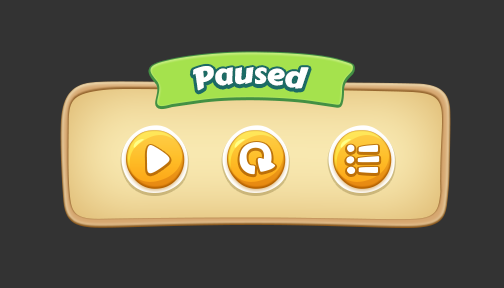
<style>
.page{position:relative;width:504px;height:288px;background:#333333}
.page>*{position:absolute;margin:0}
.t1{font:30px "CarterOne";letter-spacing:-0.02em;color:#ffffff}
</style>
<div class="page">
<p class="t1" style="left:193px;top:66px;width:116px;height:25px">Paused</p>
</div>
